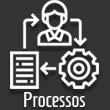
<style>
.page{position:relative;width:110px;height:110px;background:#333333}
.page>*{position:absolute;margin:0}
.t1{font:20.8px "Homenaje-Regular";color:#ffffff}
</style>
<div class="page">
<p class="t1" style="left:24px;top:92px;width:61px;height:15px">Processos</p>
</div>
